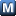
<style>
.page{position:relative;width:16px;height:16px}
.page>*{position:absolute;margin:0}
.t1{font:12px "FZH4FW--GB1-0";color:#ffffff}
</style>
<div class="page">
<p class="t1" style="left:3px;top:3px;width:10px;height:9px">M</p>
</div>
